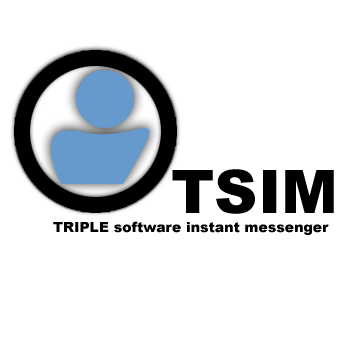
<style>
.page{position:relative;width:350px;height:340px;background:#ffffff}
.page>*{position:absolute;margin:0}
.t1{font:60px "Arial-Black";color:#000000}
.t2{font:14px "Arial-Black";color:#000000}
</style>
<div class="page">
<p class="t1" style="left:172px;top:169px;width:162px;height:45px">TSIM</p>
<p class="t2" style="left:53px;top:221px;width:276px;height:14px">TRIPLE software instant messenger</p>
</div>
